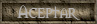
<style>
.page{position:relative;width:97px;height:24px}
.page>*{position:absolute;margin:0}
.t1{font:17.1px "Morpheus";color:#b3b0b0}
</style>
<div class="page">
<p class="t1" style="left:17px;top:5px;width:63px;height:15px">Aceptar</p>
</div>
